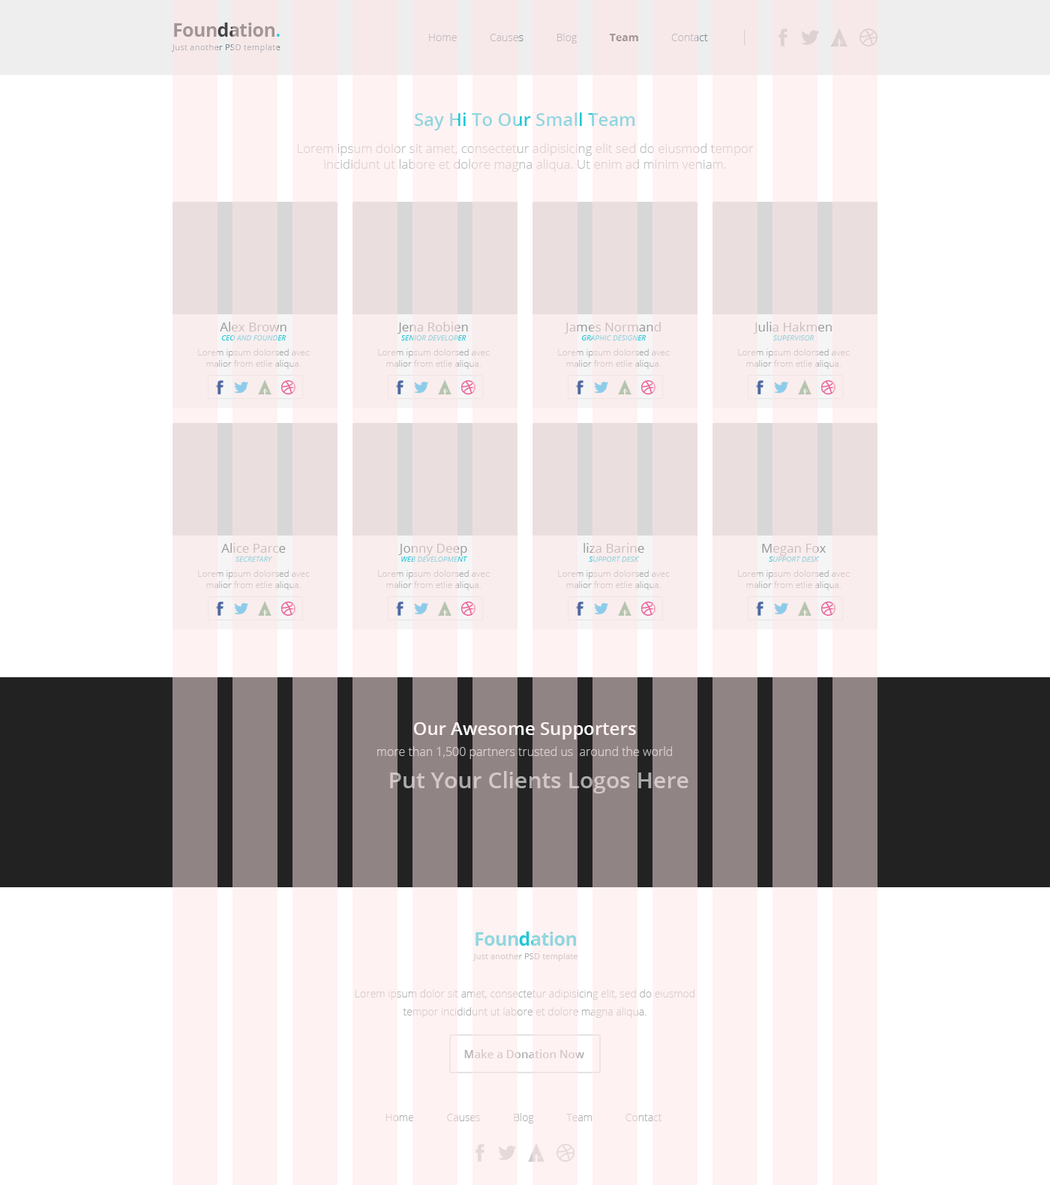
<style>
.page{position:relative;width:1050px;height:1185px;background:#ffffff}
.page>*{position:absolute;margin:0}
.t1{font:8.6px/13.5px "OpenSans";letter-spacing:0.015em;color:#a29595}
.t2{font:18.8px/22.5px "OpenSans-Bold";letter-spacing:-0.025em;color:#a29595}
.t3{font:10.5px "OpenSans-Light";color:#7e8a98}
.t4{font:10.5px "OpenSans-Bold";color:#444444}
.t5{font:15px "OpenSans-Light";color:#b0b0b0}
.t6{font:12.8px/27px "OpenSans-Light"}
.t7{font:18px "OpenSans-Semibold"}
.t8{font:12.8px/15.8px "OpenSans-Light"}
.t9{font:9px/15px "OpenSans-Light"}
.t10{font:12.8px/21.6px "OpenSans"}
.t11{font:7.5px "OpenSans-Italic"}
.t12{font:9px "OpenSans-Light"}
.t13{font:12px/21.6px "OpenSans-Light";color:#bbbbbb}
.t14{font:18px/21.6px "OpenSans-Semibold";color:#ffffff}
.t15{font:22.5px "OpenSans-Semibold";color:#d4c7c7}
.t16{font:8.2px/13.5px "OpenSans";letter-spacing:0.015em;color:#90d6df}
.t17{font:18.8px/22.5px "OpenSans-Bold";letter-spacing:-0.025em;color:#90d6df}
.t18{font:10.5px/18px "OpenSans-Light";color:#d8cbcb}
.t19{font:11.3px "OpenSans-Semibold";color:#d8cbcb}
.t20{font:10.5px "OpenSans-Light"}
</style>
<div class="page">
<p class="t1" style="left:172px;top:22px;width:108px;height:30px"><span class="t2">Foundation</span><span class="t2">.<br></span>Just another PSD template</p>
<p class="t3" style="left:429px;top:30px;width:317px;height:15px">Home            Causes            Blog            <span class="t4">Team            </span>Contact            <span class="t5">|</span></p>
<p class="t6" style="left:298px;top:112px;width:456px;height:60px;text-align:center"><span class="t7">Say Hi To Our Small Team<br></span>Lorem ipsum dolor sit amet, consectetur adipisicing elit sed do eiusmod tempor <span class="t8">incididunt ut labore et dolore magna aliqua. Ut enim ad minim veniam.</span></p>
<p class="t9" style="left:198px;top:322px;width:112px;height:47px;text-align:center"><span class="t10">Alex Brown<br></span><span class="t11">CEO AND FOUNDER<br></span>Lorem ipsum dolorsed avec <span class="t12">malior from etlie aliqua.</span></p>
<p class="t9" style="left:378px;top:322px;width:112px;height:47px;text-align:center"><span class="t10">Jena Robien<br></span><span class="t11">SENIOR DEVELOPER<br></span>Lorem ipsum dolorsed avec <span class="t12">malior from etlie aliqua.</span></p>
<p class="t9" style="left:558px;top:322px;width:112px;height:47px;text-align:center"><span class="t10">James Normand<br></span><span class="t11">GRAPHIC DESIGNER<br></span>Lorem ipsum dolorsed avec <span class="t12">malior from etlie aliqua.</span></p>
<p class="t9" style="left:738px;top:322px;width:112px;height:47px;text-align:center"><span class="t10">Julia Hakmen<br></span><span class="t11">SUPERVISOR<br></span>Lorem ipsum dolorsed avec <span class="t12">malior from etlie aliqua.</span></p>
<p class="t9" style="left:198px;top:543px;width:112px;height:47px;text-align:center"><span class="t10">Alice Parce<br></span><span class="t11">SECRETARY<br></span>Lorem ipsum dolorsed avec <span class="t12">malior from etlie aliqua.</span></p>
<p class="t9" style="left:378px;top:544px;width:112px;height:46px;text-align:center"><span class="t10">Jonny Deep<br></span><span class="t11">WEB DEVELOPMENT<br></span>Lorem ipsum dolorsed avec <span class="t12">malior from etlie aliqua.</span></p>
<p class="t9" style="left:558px;top:543px;width:112px;height:47px;text-align:center"><span class="t10">liza Barine<br></span><span class="t11">SUPPORT DESK<br></span>Lorem ipsum dolorsed avec <span class="t12">malior from etlie aliqua.</span></p>
<p class="t9" style="left:738px;top:544px;width:112px;height:46px;text-align:center"><span class="t10">Megan Fox<br></span><span class="t11">SUPPORT DESK<br></span>Lorem ipsum dolorsed avec <span class="t12">malior from etlie aliqua.</span></p>
<p class="t13" style="left:377px;top:722px;width:295px;height:37px;text-align:center"><span class="t14">Our Awesome Supporters<br></span>more than 1,500 partners trusted us  around the world</p>
<p class="t15" style="left:390px;top:771px;width:298px;height:23px">Put Your Clients Logos Here</p>
<p class="t16" style="left:472px;top:932px;width:106px;height:30px;text-align:center"><span class="t17">Foundation<br></span>Just another PSD template</p>
<p class="t18" style="left:356px;top:989px;width:338px;height:29px;text-align:center">Lorem ipsum dolor sit amet, consectetur adipisicing elit, sed do eiusmod tempor incididunt ut labore et dolore magna aliqua.</p>
<p class="t19" style="left:464px;top:1049px;width:120px;height:9px">Make a Donation Now</p>
<p class="t20" style="left:386px;top:1113px;width:276px;height:11px">Home            Causes            Blog            Team            Contact</p>
</div>
